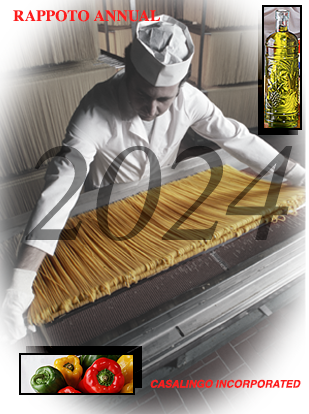
<style>
.page{position:relative;width:309px;height:414px}
.page>*{position:absolute;margin:0}
.t1{font:15.6px "Times-Bold";color:#fd1d1d}
.t2{font:138.9px "Times-Italic"}
.t3{font:10.4px "Helvetica-BoldOblique";color:#fd1d1d}
</style>
<div class="page">
<p class="t1" style="left:13px;top:10px;width:147px;height:12px">RAPPOTO ANNUAL</p>
<p class="t2" style="left:25px;top:145px;width:268px;height:96px">2024</p>
<p class="t3" style="left:150px;top:379px;width:151px;height:9px">CASALINGO INCORPORATED</p>
</div>
